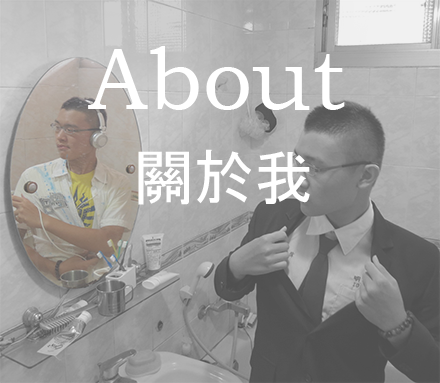
<style>
.page{position:relative;width:440px;height:383px}
.page>*{position:absolute;margin:0}
.t1{font:88px "BookmanOldStyle";color:#ffffff}
.t2{font:60px "MS-Gothic";color:#ffffff}
</style>
<div class="page">
<p class="t1" style="left:88px;top:46px;width:257px;height:64px">About</p>
<p class="t2" style="left:138px;top:149px;width:172px;height:56px">關於我</p>
</div>
